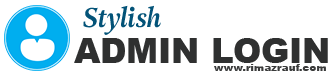
<style>
.page{position:relative;width:334px;height:75px;background:#ffffff}
.page>*{position:absolute;margin:0}
.t1{font:27px "AdrianeText-BoldItalic";color:#035378}
.t2{font:33.7px "Arial-Black";color:#2f3030;text-transform:uppercase}
.t3{font:10.4px "Arial-Black";color:#3a3b3b}
</style>
<div class="page">
<p class="t1" style="left:83px;top:5px;width:78px;height:30px">Stylish</p>
<p class="t2" style="left:74px;top:38px;width:254px;height:25px">Admin Login</p>
<p class="t3" style="left:214px;top:64px;width:112px;height:7px">www.rimazrauf.com</p>
</div>
